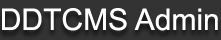
<style>
.page{position:relative;width:221px;height:40px;background:#333333}
.page>*{position:absolute;margin:0}
.t1{font:30px "ArialMT";color:#ffffff}
</style>
<div class="page">
<p class="t1" style="left:2px;top:8px;width:216px;height:23px">DDTCMS Admin</p>
</div>
